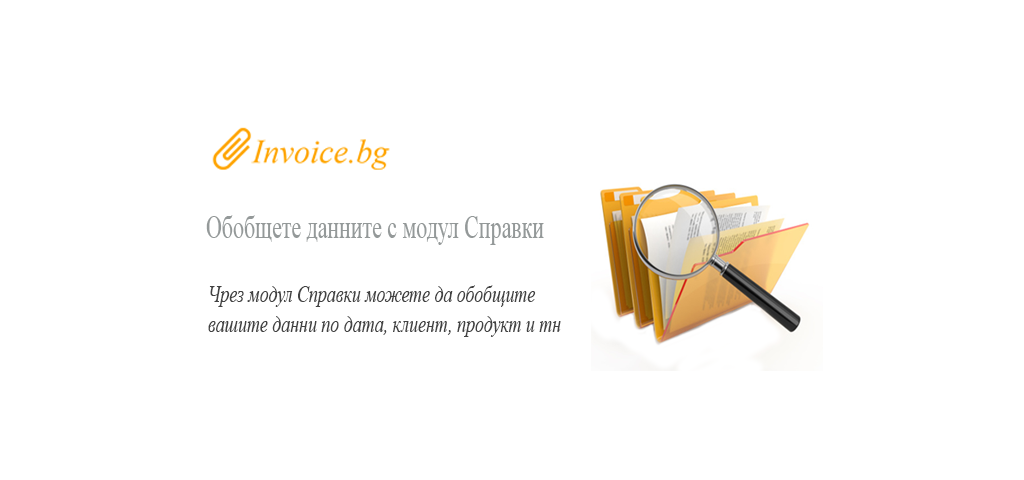
<style>
.page{position:relative;width:1024px;height:480px;background:#ffffff}
.page>*{position:absolute;margin:0}
.t1{font:32.5px "TimesNewRomanPSMT";color:#949999;scale:0.67 1}
.t2{font:24.4px "TimesNewRomanPS-ItalicMT";color:#424242;scale:0.73 1}
</style>
<div class="page">
<p class="t1" style="left:206px;top:215px;width:338px;height:30px">Обобщете данните с модул Справки</p>
<p class="t2" style="left:208px;top:285px;width:353px;height:52px;text-align:right">Чрез модул Справки можете да обобщите<br>вашите данни по дата, клиент, продукт и тн</p>
</div>
